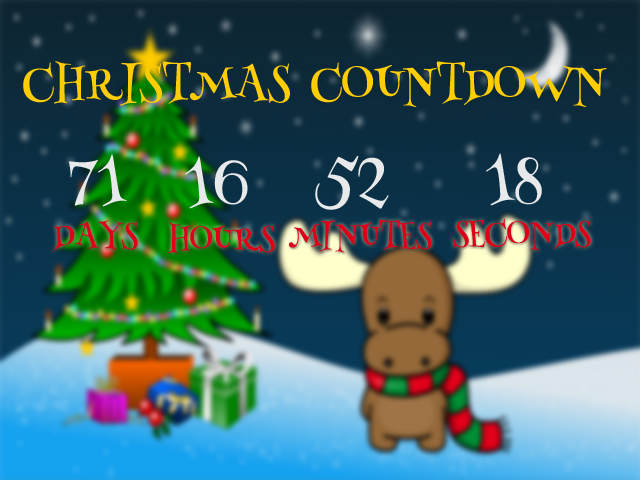
<style>
.page{position:relative;width:640px;height:480px}
.page>*{position:absolute;margin:0}
.t1{font:42px "HennyPenny-Regular";color:#ffcd03;text-transform:uppercase}
.t2{font:42px "HennyPenny-Regular";color:#ffcd02;text-transform:uppercase}
.t3{font:57px "HennyPenny-Regular";color:#e7e9eb}
.t4{font:30px "HennyPenny-Regular";color:#dd0019}
</style>
<div class="page">
<p class="t1" style="left:23px;top:61px;width:267px;height:45px">Christmas</p>
<p class="t2" style="left:311px;top:61px;width:296px;height:46px">Countdown</p>
<p class="t3" style="left:69px;top:154px;width:58px;height:53px">71</p>
<p class="t3" style="left:185px;top:156px;width:63px;height:53px">16</p>
<p class="t3" style="left:315px;top:155px;width:74px;height:55px">52</p>
<p class="t3" style="left:486px;top:153px;width:56px;height:53px">18</p>
<p class="t4" style="left:53px;top:220px;width:85px;height:31px">DAYS</p>
<p class="t4" style="left:168px;top:222px;width:107px;height:31px">HOURS</p>
<p class="t4" style="left:289px;top:219px;width:143px;height:34px">MINUTES</p>
<p class="t4" style="left:452px;top:218px;width:139px;height:33px">SECONDS</p>
</div>
